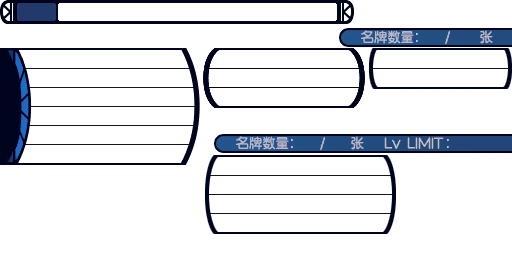
<style>
.page{position:relative;width:512px;height:256px;background:#ffffff}
.page>*{position:absolute;margin:0}
.t1{font:13.3px "FZY3--GB1-4";letter-spacing:0.025em;color:#babacb;scale:0.97 1}
</style>
<div class="page">
<p class="t1" style="left:361px;top:30px;width:53px;height:14px">名牌数量</p>
<p class="t1" style="left:480px;top:30px;width:13px;height:14px">张</p>
<p class="t1" style="left:236px;top:136px;width:53px;height:14px">名牌数量</p>
<p class="t1" style="left:351px;top:136px;width:13px;height:14px">张</p>
</div>
